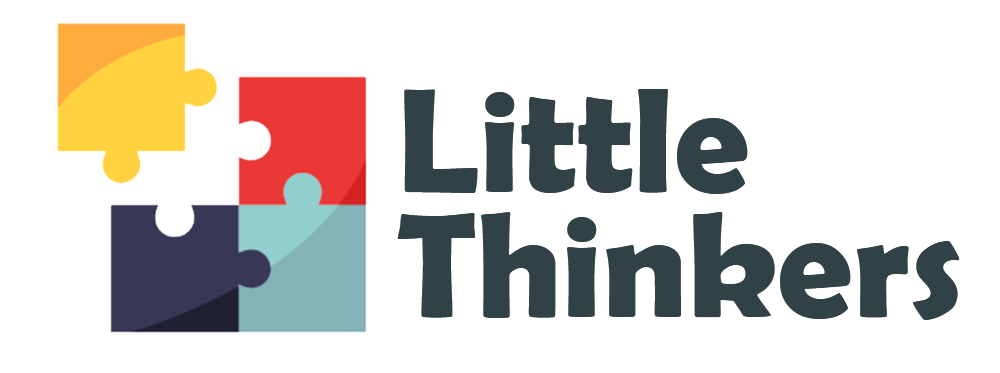
<style>
.page{position:relative;width:1000px;height:373px;background:#ffffff}
.page>*{position:absolute;margin:0}
.t1{font:150px/125px "BerlinSansFBDemi-Bold";color:#314247}
</style>
<div class="page">
<p class="t1" style="left:397px;top:89px;width:563px;height:231px">Little<br>Thinkers</p>
</div>
